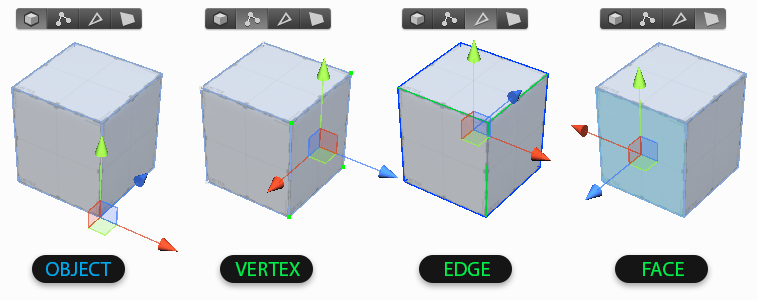
<style>
.page{position:relative;width:757px;height:300px;background:#fcfcfc}
.page>*{position:absolute;margin:0}
.t1{font:15.4px "MyriadPro-Regular";color:#00aaef;text-transform:uppercase}
.t2{font:15.4px "MyriadPro-Regular";color:#00ef49;text-transform:uppercase}
</style>
<div class="page">
<p class="t1" style="left:46px;top:262px;width:65px;height:14px">Object</p>
<p class="t2" style="left:235px;top:262px;width:65px;height:14px">Vertex</p>
<p class="t2" style="left:445px;top:262px;width:45px;height:14px">edge</p>
<p class="t2" style="left:643px;top:262px;width:41px;height:14px">face</p>
</div>
